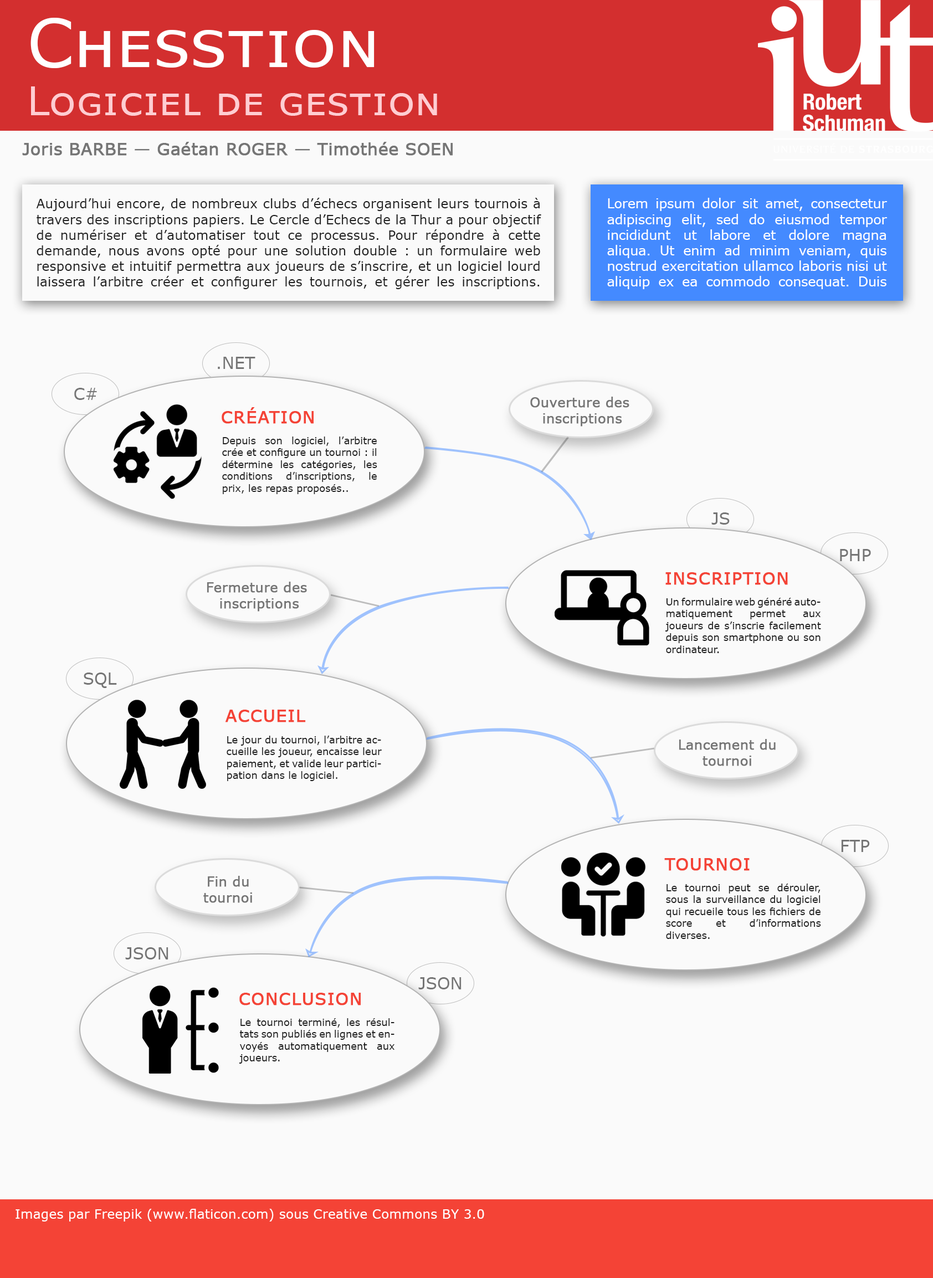
<style>
.page{position:relative;width:933px;height:1278px;background:#fafafa}
.page>*{position:absolute;margin:0}
.t1{font:66.5px "Verdana";color:#ffffff;font-variant:small-caps}
.t2{font:39.9px "Verdana";color:#ffcdd2;font-variant:small-caps}
.t3{font:16.6px "Verdana";color:#757575;font-weight:bold}
.t4{font:13px "Verdana";color:#212121}
.t5{font:13px "Verdana";color:#ffffff}
.t6{font:16.6px "Verdana";color:#757575}
.t7{font:13.3px "Verdana";color:#757575;font-weight:bold}
.t8{font:16.6px "Verdana";color:#f44336;text-transform:uppercase;font-weight:bold}
.t9{font:10px "Verdana";color:#212121}
</style>
<div class="page">
<p class="t1" style="left:30px;top:18px;width:345px;height:50px">Chesstion</p>
<p class="t2" style="left:31px;top:86px;width:406px;height:30px">Logiciel de gestion</p>
<p class="t3" style="left:22px;top:142px;width:431px;height:14px">Joris BARBE — Gaétan ROGER — Timothée SOEN</p>
<p class="t4" style="left:36px;top:198px;width:505px;height:91px;text-align:justify">Aujourd’hui encore, de nombreux clubs d’échecs organisent leurs tournois à travers des inscriptions papiers. Le Cercle d’Echecs de la Thur a pour objectif de numériser et d’automatiser tout ce processus. Pour répondre à cette demande, nous avons opté pour une solution double : un formulaire web responsive et intuitif permettra aux joueurs de s’inscrire, et un logiciel lourd laissera l’arbitre créer et configurer les tournois, et gérer les inscriptions.</p>
<p class="t5" style="left:607px;top:198px;width:280px;height:91px;text-align:justify">Lorem ipsum dolor sit amet, consectetur adipiscing elit, sed do eiusmod tempor incididunt ut labore et dolore magna aliqua. Ut enim ad minim veniam, quis nostrud exercitation ullamco laboris nisi ut aliquip ex ea commodo consequat. Duis aute irure dolor in reprehenderit in voluptate velit esse cillum dolore eu fugiat nulla pariatur. Excepteur sint occaecat cupidatat non proident, sunt in culpa qui officia deserunt mollit anim id est laborum.</p>
<p class="t6" style="left:218px;top:357px;width:37px;height:12px">.NET</p>
<p class="t6" style="left:74px;top:388px;width:23px;height:12px">C#</p>
<p class="t7" style="left:530px;top:397px;width:99px;height:30px;text-align:center">Ouverture des <br>inscriptions</p>
<p class="t8" style="left:222px;top:407px;width:92px;height:17px">CRéation</p>
<p class="t9" style="left:222px;top:437px;width:155px;height:57px;text-align:justify">Depuis son logiciel, l’arbitre crée et configure un tournoi : il détermine les catégories, les conditions d’inscriptions, le prix, les repas proposés..</p>
<p class="t6" style="left:711px;top:512px;width:19px;height:13px">JS</p>
<p class="t6" style="left:840px;top:549px;width:31px;height:12px">PHP</p>
<p class="t7" style="left:207px;top:582px;width:100px;height:30px;text-align:center">Fermeture des <br>inscriptions</p>
<p class="t8" style="left:665px;top:572px;width:123px;height:13px">Inscription</p>
<p class="t9" style="left:665px;top:598px;width:156px;height:55px;text-align:justify">Un formulaire web généré automatiquement permet aux joueurs de s’inscrie facilement depuis son smartphone ou son ordinateur.</p>
<p class="t6" style="left:84px;top:673px;width:33px;height:15px">SQL</p>
<p class="t8" style="left:225px;top:710px;width:81px;height:12px">Accueil</p>
<p class="t9" style="left:227px;top:736px;width:155px;height:45px;text-align:justify">Le jour du tournoi, l’arbitre accueille les joueur, encaisse leur paiement, et valide leur participation dans le logiciel.</p>
<p class="t7" style="left:679px;top:739px;width:97px;height:27px;text-align:center">Lancement du<br>tournoi</p>
<p class="t6" style="left:841px;top:840px;width:29px;height:12px">FTP</p>
<p class="t8" style="left:664px;top:858px;width:86px;height:13px">Tournoi</p>
<p class="t7" style="left:203px;top:876px;width:49px;height:27px;text-align:center">Fin du<br>tournoi</p>
<p class="t9" style="left:666px;top:884px;width:155px;height:55px;text-align:justify">Le tournoi peut se dérouler, sous la surveillance du logiciel qui recueile tous les fichiers de score et d’informations diverses.</p>
<p class="t6" style="left:125px;top:947px;width:43px;height:13px">JSON</p>
<p class="t6" style="left:418px;top:977px;width:43px;height:12px">JSON</p>
<p class="t8" style="left:239px;top:993px;width:122px;height:13px">Conclusion</p>
<p class="t9" style="left:239px;top:1018px;width:155px;height:46px;text-align:justify">Le tournoi terminé, les résultats son publiés en lignes et envoyés automatiquement aux joueurs.</p>
<p class="t5" style="left:16px;top:1209px;width:468px;height:13px">Images par Freepik (www.flaticon.com) sous Creative Commons BY 3.0</p>
</div>
